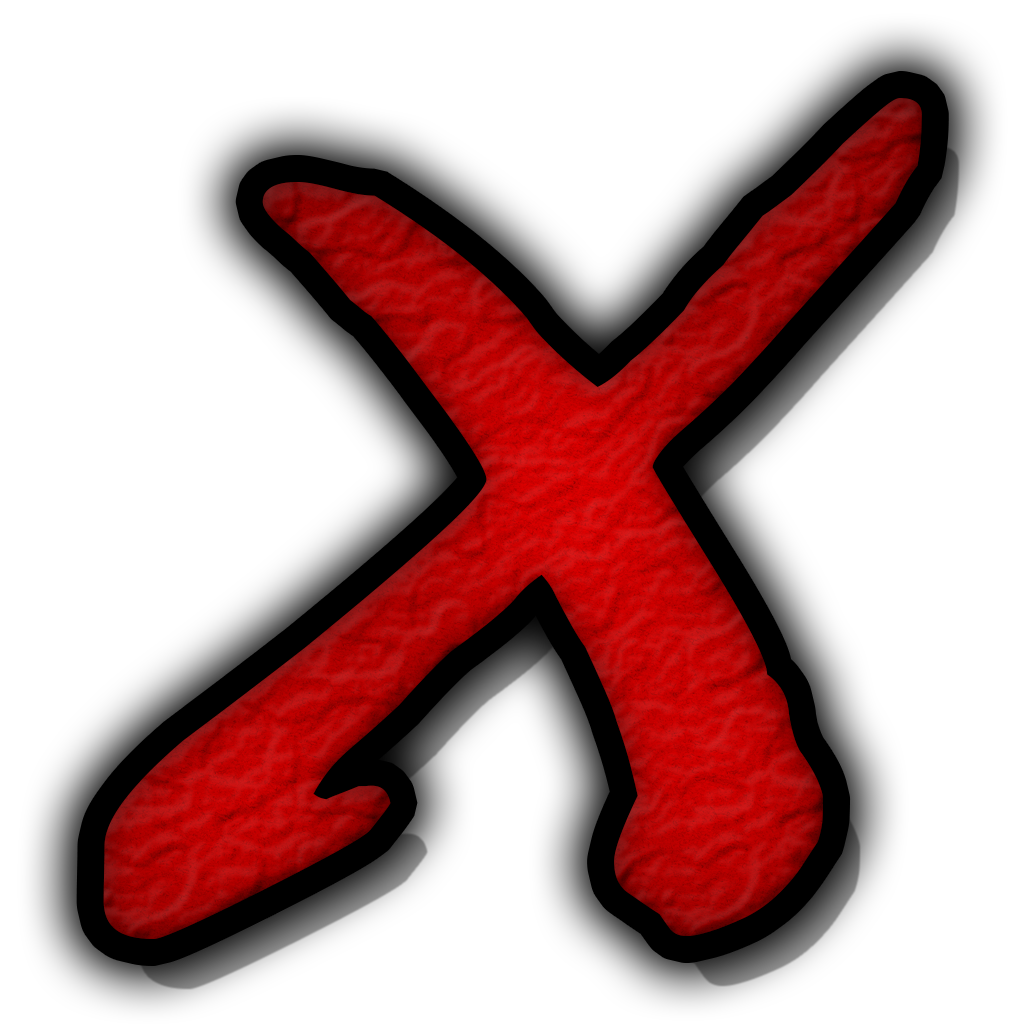
<style>
.page{position:relative;width:1024px;height:1024px;background:#ffffff}
.page>*{position:absolute;margin:0}
.t1{font:1122.9px "Mistral";scale:1.59 1}
</style>
<div class="page">
<p class="t1" style="left:103px;top:98px;width:819px;height:841px">X</p>
</div>
